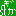
<style>
.page{position:relative;width:16px;height:16px;background:#009900}
.page>*{position:absolute;margin:0}
.t1{font:16px "UnifontExMono";color:#ffffff}
</style>
<div class="page">
<p class="t1" style="left:0px;top:5px;width:7px;height:11px">ﬆ</p>
</div>
